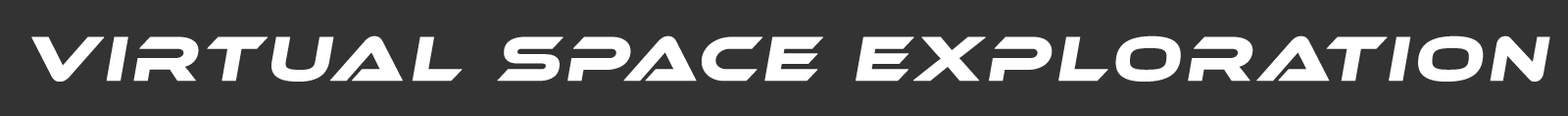
<style>
.page{position:relative;width:1568px;height:116px;background:#333333}
.page>*{position:absolute;margin:0}
.t1{font:64.7px "EthnocentricRg-Italic";letter-spacing:0.06em;color:#ffffff;font-weight:bold}
</style>
<div class="page">
<p class="t1" style="left:31px;top:35px;width:1519px;height:46px">Virtual Space Exploration</p>
</div>
